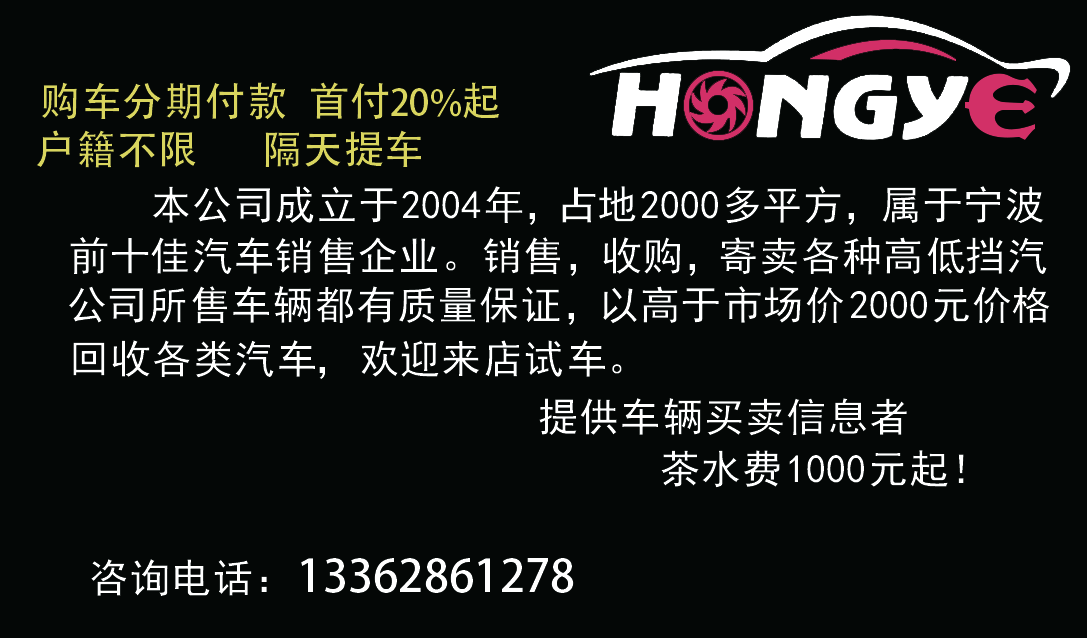
<style>
.page{position:relative;width:1087px;height:638px;background:#040706}
.page>*{position:absolute;margin:0}
.t1{font:40px "AdobeHeitiStd-Regular";color:#d9d55e}
.t2{font:36px "AdobeHeitiStd-Regular";color:#d9d55e}
.t3{font:40px "SimHei";color:#ffffff}
.t4{font:45px "AdobeHeitiStd-Regular";color:#ffffff}
</style>
<div class="page">
<p class="t1" style="left:41px;top:82px;width:245px;height:38px">购车分期付款</p>
<p class="t2" style="left:311px;top:82px;width:189px;height:37px"><span class="t1">首付   </span>20％<span class="t1">起</span></p>
<p class="t1" style="left:36px;top:130px;width:160px;height:38px">户籍不限</p>
<p class="t1" style="left:265px;top:130px;width:156px;height:37px">隔天提车</p>
<p class="t3" style="left:152px;top:186px;width:892px;height:39px">本公司成立于2004年，占地2000多平方，属于宁波</p>
<p class="t3" style="left:70px;top:237px;width:977px;height:39px">前十佳汽车销售企业。销售，收购，寄卖各种高低挡汽</p>
<p class="t3" style="left:69px;top:286px;width:981px;height:39px">公司所售车辆都有质量保证，以高于市场价2000元价格</p>
<p class="t3" style="left:73px;top:340px;width:549px;height:39px">回收各类汽车，欢迎来店试车。</p>
<p class="t3" style="left:539px;top:398px;width:368px;height:38px">提供车辆买卖信息者</p>
<p class="t3" style="left:661px;top:450px;width:303px;height:38px">茶水费1000元起！</p>
<p class="t4" style="left:301px;top:558px;width:273px;height:35px">13362861278</p>
<p class="t3" style="left:91px;top:559px;width:176px;height:37px">咨询电话：</p>
</div>
